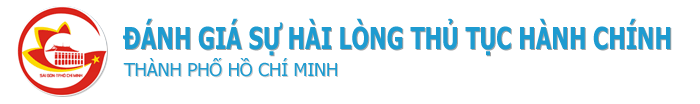
<style>
.page{position:relative;width:700px;height:104px;background:#ffffff}
.page>*{position:absolute;margin:0}
.t1{font:30.3px "Tahoma-Bold";color:#1e9bd0;scale:0.75 1}
.t2{font:18px "Tahoma";color:#1e9bd0}
</style>
<div class="page">
<p class="t1" style="left:123px;top:18px;width:548px;height:38px">ĐÁNH GIÁ SỰ HÀI LÒNG THỦ TỤC HÀNH CHÍNH</p>
<p class="t2" style="left:123px;top:58px;width:214px;height:19px">THÀNH PHỐ HỒ CHÍ MINH</p>
</div>
